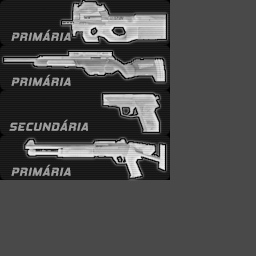
<style>
.page{position:relative;width:256px;height:256px;background:#494949}
.page>*{position:absolute;margin:0}
.t1{font:11.5px "HemiHeadRg-BoldItalic";letter-spacing:0.08em;color:#9d9d9d;text-transform:uppercase}
</style>
<div class="page">
<p class="t1" style="left:11px;top:29px;width:60px;height:12px">pRIMÁRIA</p>
<p class="t1" style="left:11px;top:74px;width:60px;height:12px">PRIMÁRIA</p>
<p class="t1" style="left:9px;top:119px;width:79px;height:12px">secundária</p>
<p class="t1" style="left:11px;top:164px;width:60px;height:12px">PRIMÁRIA</p>
</div>
